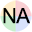
<style>
.page{position:relative;width:32px;height:32px;background:#ffffff}
.page>*{position:absolute;margin:0}
.t1{font:21.1px "ArialMT";letter-spacing:-0.035em;color:#000000}
</style>
<div class="page">
<p class="t1" style="left:3px;top:8px;width:27px;height:16px">NA</p>
</div>
